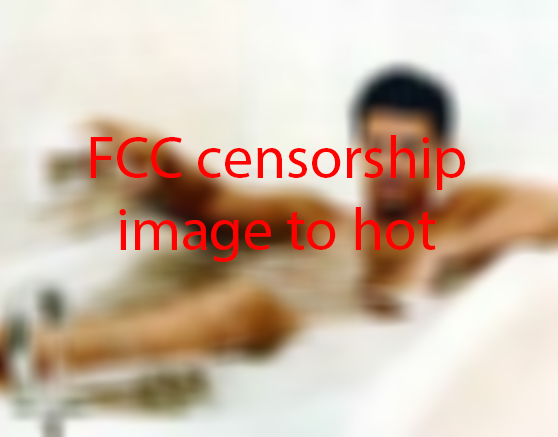
<style>
.page{position:relative;width:558px;height:437px}
.page>*{position:absolute;margin:0}
.t1{font:60px "MyriadPro-Regular";color:#fe0101}
</style>
<div class="page">
<p class="t1" style="left:90px;top:135px;width:375px;height:127px;text-align:center">FCC censorship<br>image to hot</p>
</div>
